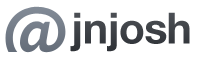
<style>
.page{position:relative;width:200px;height:59px;background:#ffffff}
.page>*{position:absolute;margin:0}
.t1{font:43px "HelveticaNeue-Bold";color:#31353b}
</style>
<div class="page">
<p class="t1" style="left:70px;top:12px;width:120px;height:40px">jnjosh</p>
</div>
